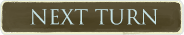
<style>
.page{position:relative;width:184px;height:35px}
.page>*{position:absolute;margin:0}
.t1{font:20px "Trajan-Regular";color:#c5e1e1}
</style>
<div class="page">
<p class="t1" style="left:30px;top:9px;width:128px;height:16px">Next TURN</p>
</div>
